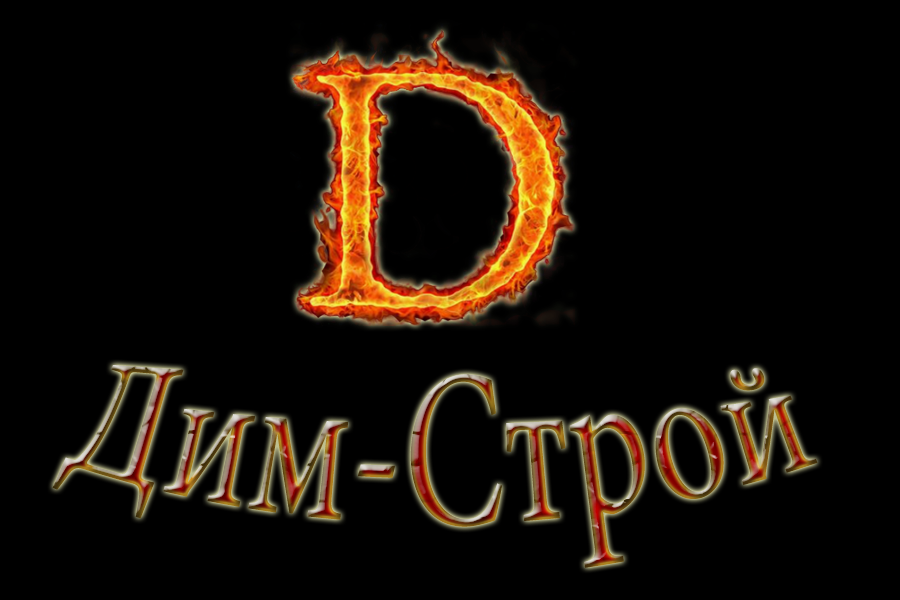
<style>
.page{position:relative;width:900px;height:600px;background:#000000}
.page>*{position:absolute;margin:0}
.t1{font:150px "MinionPro-Regular"}
</style>
<div class="page">
<p class="t1" style="left:52px;top:365px;width:766px;height:203px">Дим-Строй</p>
</div>
